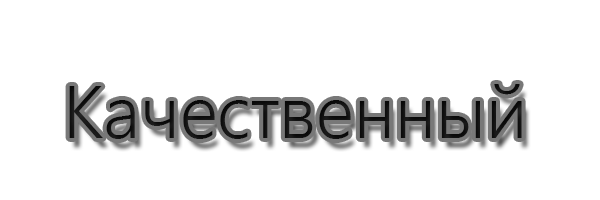
<style>
.page{position:relative;width:600px;height:200px;background:#ffffff}
.page>*{position:absolute;margin:0}
.t1{font:72px "MalgunGothic-Semilight";color:#101010}
</style>
<div class="page">
<p class="t1" style="left:69px;top:84px;width:453px;height:55px">Качественный</p>
</div>
